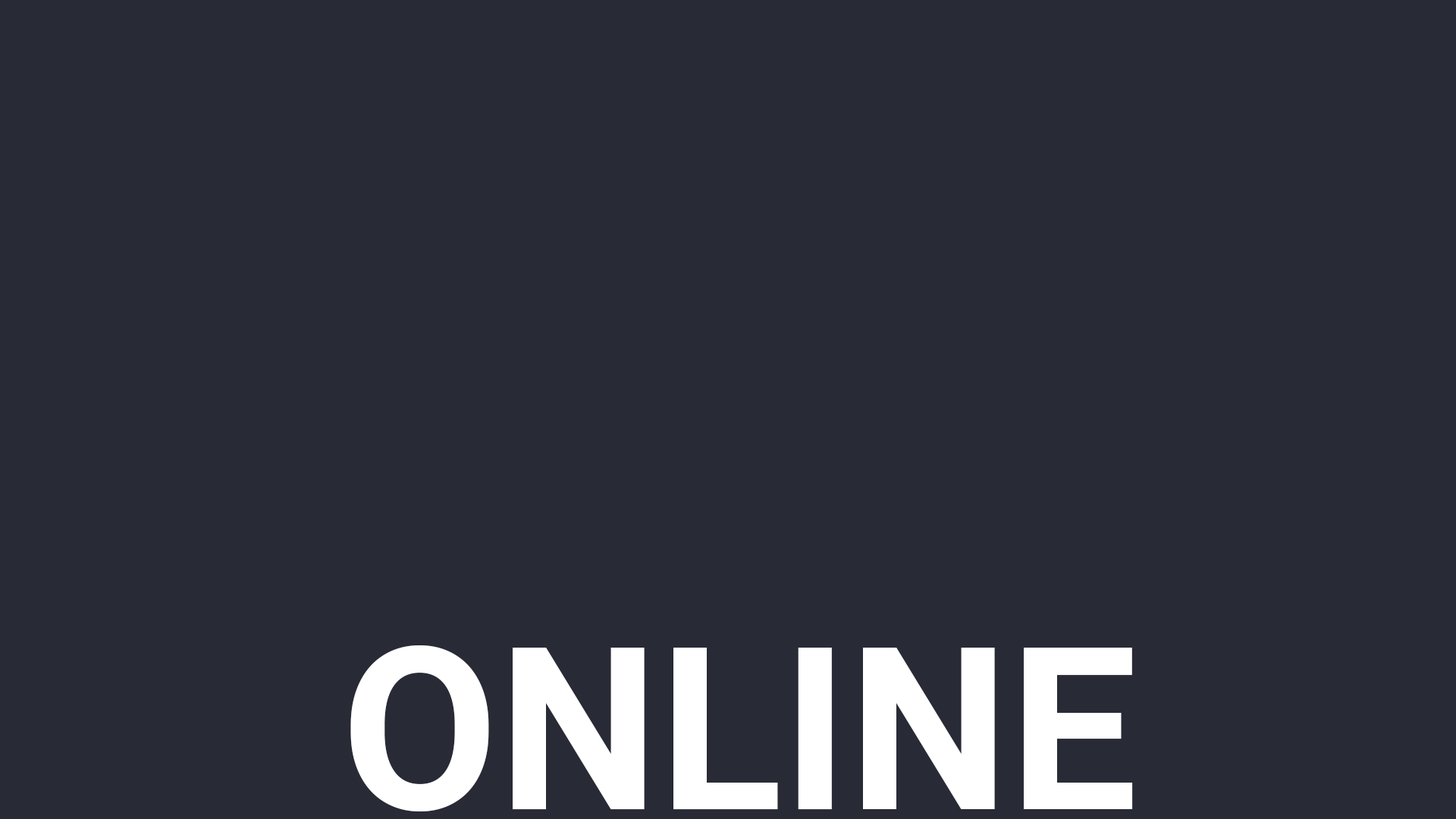
<style>
.page{position:relative;width:1456px;height:819px;background:#282a36}
.page>*{position:absolute;margin:0}
.t1{font:227.5px "Roboto-Bold";color:#ffffff}
</style>
<div class="page">
<p class="t1" style="left:350px;top:645px;width:783px;height:166px">ONLINE</p>
</div>
